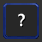
<style>
.page{position:relative;width:42px;height:42px;background:#272727}
.page>*{position:absolute;margin:0}
.t1{font:18px "BerlinSansFB-Reg";color:#ffffff}
</style>
<div class="page">
<p class="t1" style="left:18px;top:13px;width:7px;height:14px">?</p>
</div>
